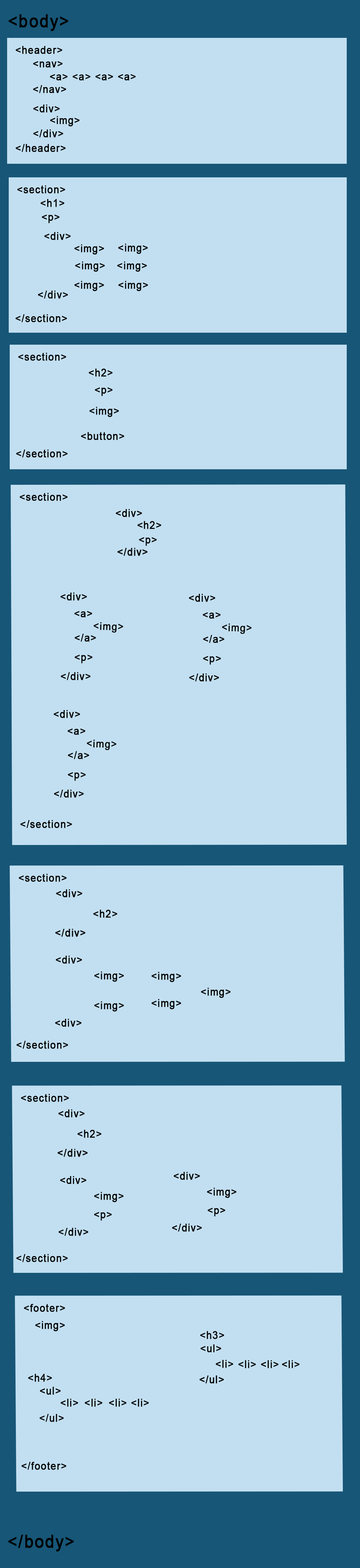
<style>
.page{position:relative;width:360px;height:1568px;background:#c2dff1}
.page>*{position:absolute;margin:0}
.t1{font:17.8px "ArialMT";letter-spacing:0.06em;color:#000000;font-weight:bold;scale:0.91 1}
.t2{font:10.7px "ArialMT";letter-spacing:0.06em;color:#000000;font-weight:bold;scale:0.9 1}
.t3{font:10.7px "ArialMT";letter-spacing:0.06em;color:#000000;font-weight:bold;scale:0.91 1}
.t4{font:10.6px "ArialMT";letter-spacing:0.06em;color:#000000;font-weight:bold;scale:0.91 1}
.t5{font:10.6px "ArialMT";letter-spacing:0.06em;color:#000000;font-weight:bold;scale:0.9 1}
</style>
<div class="page">
<p class="t1" style="left:8px;top:14px;width:60px;height:17px">&lt;body&gt;</p>
<p class="t2" style="left:16px;top:46px;width:46px;height:8px">&lt;header&gt;</p>
<p class="t2" style="left:33px;top:61px;width:30px;height:7px">&lt;nav&gt;</p>
<p class="t3" style="left:50px;top:74px;width:86px;height:7px">&lt;a&gt; &lt;a&gt; &lt;a&gt; &lt;a&gt;</p>
<p class="t2" style="left:33px;top:85px;width:33px;height:8px">&lt;/nav&gt;</p>
<p class="t4" style="left:33px;top:105px;width:27px;height:8px">&lt;div&gt;</p>
<p class="t4" style="left:50px;top:116px;width:30px;height:11px">&lt;img&gt;</p>
<p class="t4" style="left:33px;top:129px;width:30px;height:9px">&lt;/div&gt;</p>
<p class="t2" style="left:16px;top:144px;width:50px;height:8px">&lt;/header&gt;</p>
<p class="t2" style="left:17px;top:185px;width:48px;height:9px">&lt;section&gt;</p>
<p class="t2" style="left:40px;top:199px;width:24px;height:8px">&lt;h1&gt;</p>
<p class="t2" style="left:42px;top:215px;width:18px;height:8px">&lt;p&gt;</p>
<p class="t4" style="left:44px;top:232px;width:27px;height:8px">&lt;div&gt;</p>
<p class="t2" style="left:74px;top:244px;width:30px;height:11px">&lt;img&gt;</p>
<p class="t2" style="left:118px;top:244px;width:30px;height:10px">&lt;img&gt;</p>
<p class="t2" style="left:75px;top:261px;width:30px;height:11px">&lt;img&gt;</p>
<p class="t2" style="left:117px;top:261px;width:30px;height:11px">&lt;img&gt;</p>
<p class="t2" style="left:74px;top:281px;width:30px;height:10px">&lt;img&gt;</p>
<p class="t2" style="left:118px;top:281px;width:30px;height:10px">&lt;img&gt;</p>
<p class="t4" style="left:38px;top:291px;width:30px;height:8px">&lt;/div&gt;</p>
<p class="t4" style="left:16px;top:314px;width:51px;height:8px">&lt;/section&gt;</p>
<p class="t2" style="left:18px;top:353px;width:48px;height:8px">&lt;section&gt;</p>
<p class="t2" style="left:89px;top:369px;width:24px;height:8px">&lt;h2&gt;</p>
<p class="t2" style="left:95px;top:387px;width:18px;height:9px">&lt;p&gt;</p>
<p class="t2" style="left:89px;top:407px;width:30px;height:10px">&lt;img&gt;</p>
<p class="t2" style="left:81px;top:432px;width:43px;height:8px">&lt;button&gt;</p>
<p class="t4" style="left:16px;top:450px;width:52px;height:8px">&lt;/section&gt;</p>
<p class="t2" style="left:20px;top:493px;width:48px;height:8px">&lt;section&gt;</p>
<p class="t5" style="left:116px;top:509px;width:26px;height:8px">&lt;div&gt;</p>
<p class="t5" style="left:138px;top:521px;width:23px;height:8px">&lt;h2&gt;</p>
<p class="t5" style="left:139px;top:537px;width:18px;height:9px">&lt;p&gt;</p>
<p class="t2" style="left:61px;top:593px;width:26px;height:8px">&lt;div&gt;</p>
<p class="t2" style="left:189px;top:594px;width:27px;height:8px">&lt;div&gt;</p>
<p class="t2" style="left:74px;top:611px;width:18px;height:6px">&lt;a&gt;</p>
<p class="t2" style="left:203px;top:612px;width:18px;height:7px">&lt;a&gt;</p>
<p class="t2" style="left:94px;top:622px;width:29px;height:11px;rotate:2deg">&lt;img&gt;</p>
<p class="t2" style="left:222px;top:623px;width:30px;height:11px;rotate:2deg">&lt;img&gt;</p>
<p class="t2" style="left:75px;top:634px;width:21px;height:8px">&lt;/a&gt;</p>
<p class="t2" style="left:203px;top:635px;width:22px;height:8px">&lt;/a&gt;</p>
<p class="t2" style="left:75px;top:655px;width:18px;height:8px">&lt;p&gt;</p>
<p class="t2" style="left:203px;top:656px;width:18px;height:9px">&lt;p&gt;</p>
<p class="t2" style="left:61px;top:672px;width:30px;height:8px">&lt;/div&gt;</p>
<p class="t2" style="left:189px;top:673px;width:30px;height:9px">&lt;/div&gt;</p>
<p class="t2" style="left:54px;top:710px;width:26px;height:8px">&lt;div&gt;</p>
<p class="t2" style="left:68px;top:728px;width:17px;height:7px">&lt;a&gt;</p>
<p class="t2" style="left:87px;top:740px;width:30px;height:10px;rotate:2deg">&lt;img&gt;</p>
<p class="t2" style="left:68px;top:751px;width:21px;height:8px">&lt;/a&gt;</p>
<p class="t2" style="left:68px;top:772px;width:18px;height:9px">&lt;p&gt;</p>
<p class="t2" style="left:54px;top:790px;width:30px;height:8px">&lt;/div&gt;</p>
<p class="t4" style="left:20px;top:820px;width:52px;height:8px">&lt;/section&gt;</p>
<p class="t2" style="left:19px;top:874px;width:48px;height:8px">&lt;section&gt;</p>
<p class="t2" style="left:56px;top:889px;width:27px;height:8px">&lt;div&gt;</p>
<p class="t2" style="left:93px;top:910px;width:24px;height:8px">&lt;h2&gt;</p>
<p class="t2" style="left:56px;top:956px;width:26px;height:8px">&lt;div&gt;</p>
<p class="t3" style="left:94px;top:972px;width:30px;height:10px">&lt;img&gt;</p>
<p class="t3" style="left:151px;top:972px;width:30px;height:10px">&lt;img&gt;</p>
<p class="t3" style="left:201px;top:988px;width:30px;height:10px">&lt;img&gt;</p>
<p class="t3" style="left:94px;top:1001px;width:30px;height:11px">&lt;img&gt;</p>
<p class="t3" style="left:151px;top:999px;width:30px;height:10px">&lt;img&gt;</p>
<p class="t3" style="left:55px;top:1019px;width:27px;height:8px">&lt;div&gt;</p>
<p class="t4" style="left:17px;top:1041px;width:51px;height:8px">&lt;/section&gt;</p>
<p class="t2" style="left:21px;top:1094px;width:48px;height:8px">&lt;section&gt;</p>
<p class="t2" style="left:58px;top:1109px;width:27px;height:9px">&lt;div&gt;</p>
<p class="t2" style="left:77px;top:1130px;width:25px;height:8px">&lt;h2&gt;</p>
<p class="t2" style="left:60px;top:1176px;width:26px;height:8px">&lt;div&gt;</p>
<p class="t2" style="left:174px;top:1172px;width:26px;height:8px">&lt;div&gt;</p>
<p class="t2" style="left:94px;top:1192px;width:30px;height:10px">&lt;img&gt;</p>
<p class="t2" style="left:207px;top:1188px;width:30px;height:10px">&lt;img&gt;</p>
<p class="t2" style="left:94px;top:1212px;width:18px;height:9px">&lt;p&gt;</p>
<p class="t2" style="left:208px;top:1208px;width:18px;height:9px">&lt;p&gt;</p>
<p class="t2" style="left:59px;top:1228px;width:29px;height:8px">&lt;/div&gt;</p>
<p class="t2" style="left:172px;top:1224px;width:30px;height:8px">&lt;/div&gt;</p>
<p class="t4" style="left:16px;top:1254px;width:52px;height:8px">&lt;/section&gt;</p>
<p class="t2" style="left:24px;top:1304px;width:41px;height:8px">&lt;footer&gt;</p>
<p class="t2" style="left:35px;top:1321px;width:30px;height:10px">&lt;img&gt;</p>
<p class="t2" style="left:200px;top:1331px;width:24px;height:8px">&lt;h3&gt;</p>
<p class="t2" style="left:201px;top:1344px;width:20px;height:8px">&lt;ul&gt;</p>
<p class="t2" style="left:216px;top:1360px;width:17px;height:8px">&lt;li&gt;</p>
<p class="t2" style="left:239px;top:1360px;width:17px;height:8px">&lt;li&gt;</p>
<p class="t2" style="left:261px;top:1360px;width:18px;height:8px">&lt;li&gt;</p>
<p class="t2" style="left:282px;top:1360px;width:18px;height:8px">&lt;li&gt;</p>
<p class="t2" style="left:28px;top:1374px;width:24px;height:8px">&lt;h4&gt;</p>
<p class="t2" style="left:40px;top:1387px;width:21px;height:8px">&lt;ul&gt;</p>
<p class="t3" style="left:61px;top:1399px;width:17px;height:8px">&lt;li&gt;</p>
<p class="t3" style="left:85px;top:1399px;width:18px;height:8px">&lt;li&gt;</p>
<p class="t3" style="left:109px;top:1399px;width:18px;height:8px">&lt;li&gt;</p>
<p class="t3" style="left:131px;top:1399px;width:18px;height:8px">&lt;li&gt;</p>
<p class="t2" style="left:39px;top:1414px;width:25px;height:8px">&lt;/ul&gt;</p>
<p class="t3" style="left:21px;top:1462px;width:45px;height:8px">&lt;/footer&gt;</p>
<p class="t1" style="left:8px;top:1535px;width:66px;height:16px">&lt;/body&gt;</p>
</div>
